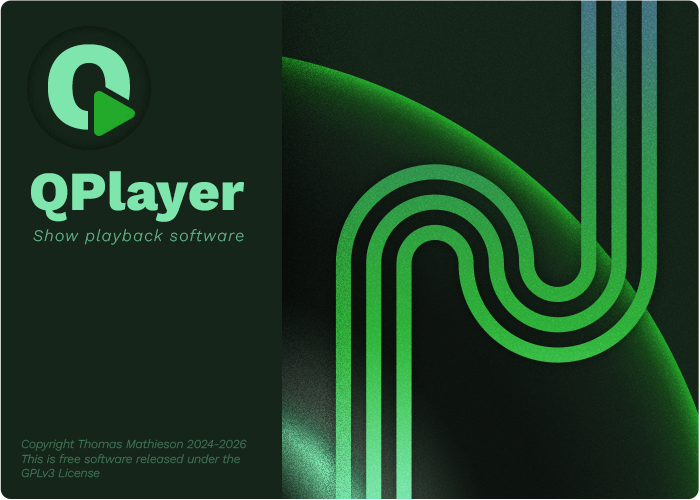
<style>
.page{position:relative;width:700px;height:500px;background:#152519}
.page>*{position:absolute;margin:0}
.t1{font:55px "WorkSansRoman-ExtraBold";color:#7ee6ad}
.t2{font:16px "WorkSansItalic-LightItalic";letter-spacing:0.09em;color:#66b98b}
.t3{font:12px "WorkSansItalic-LightItalic"}
</style>
<div class="page">
<p class="t1" style="left:31px;top:171px;width:213px;height:51px">QPlayer</p>
<p class="t2" style="left:33px;top:229px;width:211px;height:16px">Show playback software</p>
<p class="t3" style="left:21px;top:439px;width:226px;height:39px">Copyright Thomas Mathieson 2024-2026<br>This is free software released under the GPLv3 License</p>
</div>
